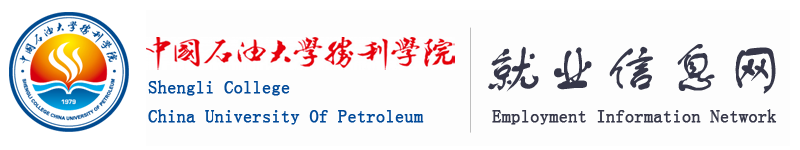
<style>
.page{position:relative;width:800px;height:150px;background:#fdfdfd}
.page>*{position:absolute;margin:0}
.t1{font:61px "FZSTK--GBK1-0";color:#363849}
.t2{font:18px "SimSun";color:#014a99;font-weight:bold}
.t3{font:18px "SimSun";color:#363849;font-weight:bold}
</style>
<div class="page">
<p class="t1" style="left:488px;top:44px;width:288px;height:50px">就业信息网</p>
<p class="t2" style="left:148px;top:80px;width:142px;height:16px">Shengli College</p>
<p class="t2" style="left:148px;top:109px;width:276px;height:16px">China University Of Petroleum</p>
<p class="t3" style="left:492px;top:109px;width:285px;height:16px">Employment Information Network</p>
</div>
